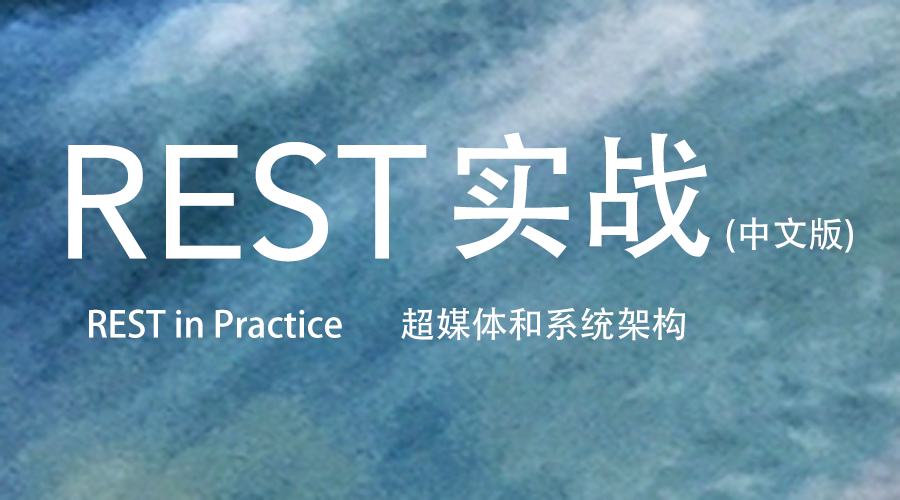
<style>
.page{position:relative;width:900px;height:500px}
.page>*{position:absolute;margin:0}
.t1{font:136px "AdobeHeitiStd-Regular";color:#ffffff}
.t2{font:160px "Avenir-Roman";color:#ffffff}
.t3{font:36px "AdobeHeitiStd-Regular";color:#ffffff}
</style>
<div class="page">
<p class="t1" style="left:454px;top:132px;width:256px;height:128px">实战</p>
<p class="t2" style="left:68px;top:142px;width:359px;height:120px">REST</p>
<p class="t3" style="left:726px;top:217px;width:127px;height:36px">(中文版)</p>
<p class="t3" style="left:89px;top:307px;width:596px;height:34px">REST in Practice       超媒体和系统架构</p>
</div>
